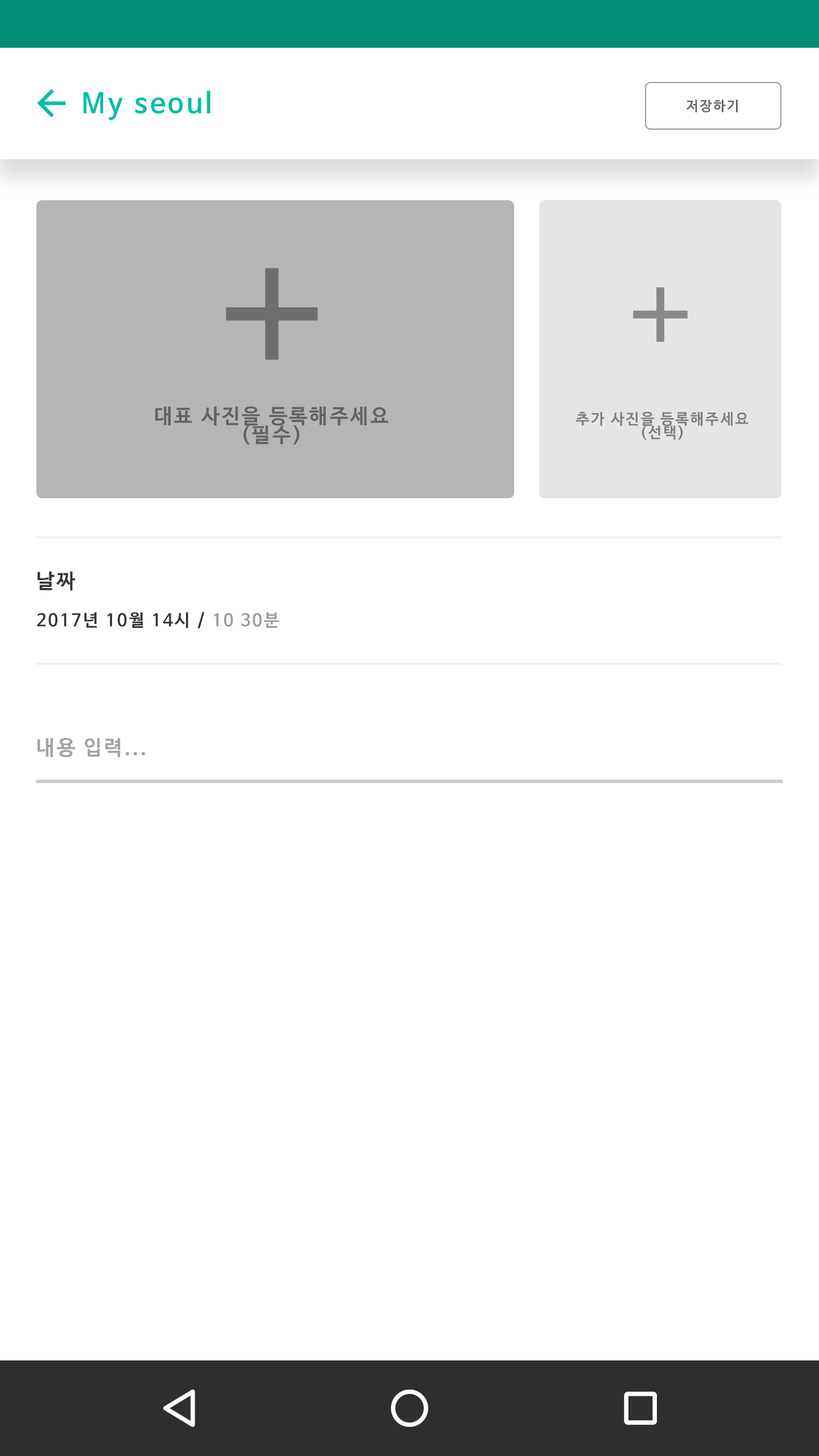
<style>
.page{position:relative;width:819px;height:1456px;background:#ffffff}
.page>*{position:absolute;margin:0}
.t1{font:27.3px "NanumBarunGothicBold";letter-spacing:0.1em;color:#00bfa5}
.t2{font:13.6px "NanumBarunGothicBold";letter-spacing:0.1em;color:#676767}
.t3{font:20.5px/18.4px "NanumBarunGothicBold";letter-spacing:0.1em;color:#626262}
.t4{font:15.1px/13.6px "NanumBarunGothicBold";letter-spacing:0.1em;color:#7e7e7e}
.t5{font:20.5px "NanumBarunGothicBold";letter-spacing:0.1em;color:#343434}
.t6{font:17.1px "NanumBarunGothicBold";letter-spacing:0.1em}
.t7{font:20.5px "NanumBarunGothicBold";letter-spacing:0.1em;color:#a3a3a3}
</style>
<div class="page">
<p class="t1" style="left:83px;top:90px;width:127px;height:30px">My seoul</p>
<p class="t2" style="left:686px;top:100px;width:52px;height:13px">저장하기</p>
<p class="t3" style="left:155px;top:406px;width:233px;height:39px;text-align:center">대표 사진을 등록해주세요<br>(필수)</p>
<p class="t4" style="left:576px;top:412px;width:172px;height:28px;text-align:center">추가 사진을 등록해주세요<br>(선택)</p>
<p class="t5" style="left:38px;top:571px;width:37px;height:19px">날짜</p>
<p class="t6" style="left:37px;top:612px;width:242px;height:16px">2017년 10월 14시 / 10 30분</p>
<p class="t7" style="left:38px;top:738px;width:107px;height:20px">내용 입력...</p>
</div>
